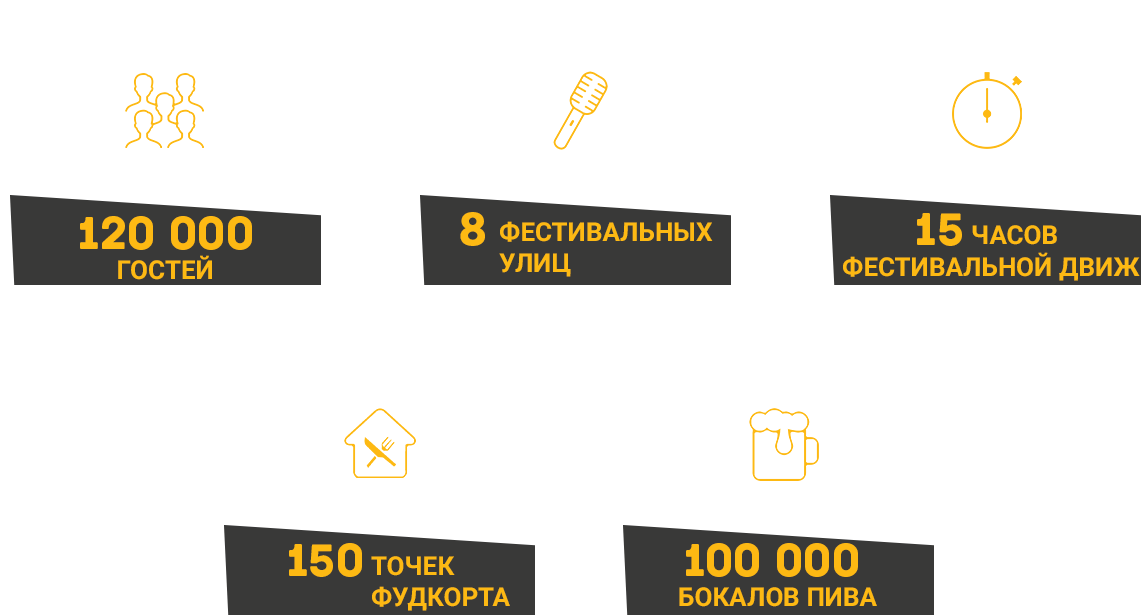
<style>
.page{position:relative;width:1141px;height:615px;background:#ffffff}
.page>*{position:absolute;margin:0}
.t1{font:26px "Roboto-Bold";color:#fdb913;text-transform:uppercase}
</style>
<div class="page">
<p class="t1" style="left:499px;top:221px;width:214px;height:56px">фестивальных <br>улиц</p>
<p class="t1" style="left:972px;top:225px;width:85px;height:20px">часов</p>
<p class="t1" style="left:118px;top:255px;width:94px;height:25px">гостей</p>
<p class="t1" style="left:843px;top:252px;width:297px;height:29px">фестивальной движ</p>
<p class="t1" style="left:371px;top:556px;width:139px;height:55px">точек<br>фудкорта</p>
<p class="t1" style="left:679px;top:587px;width:198px;height:20px">бокалов пива</p>
</div>
